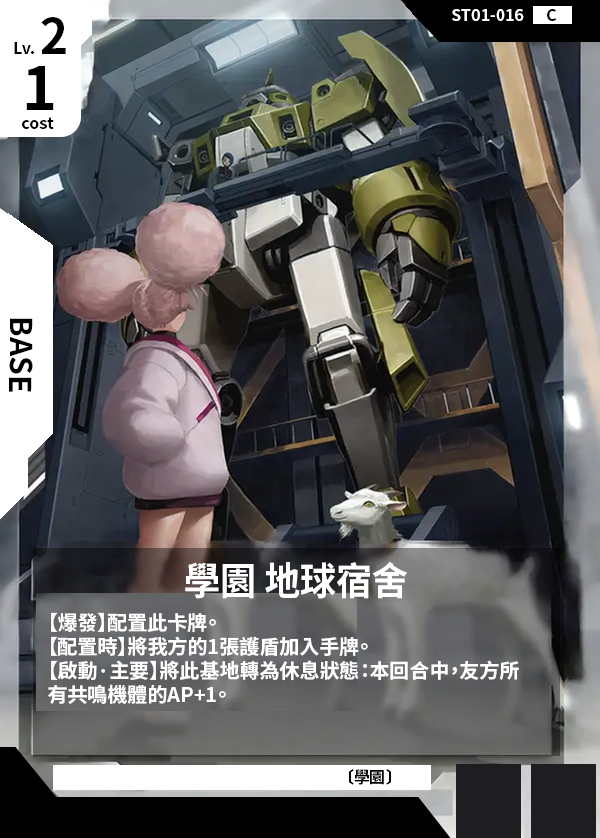
<style>
.page{position:relative;width:600px;height:838px}
.page>*{position:absolute;margin:0}
.t1{font:48px "NotoSansCJKtc-Bold";color:#000000}
.t2{font:16px "NotoSansCJKtc-Bold";color:#ffffff}
.t3{font:16px "NotoSansCJKtc-Bold";color:#000000}
.t4{font:60px "NotoSansCJKtc-Bold";color:#000000}
.t5{font:30px "NotoSansCJKtc-Bold";color:#000000}
.t6{font:38.4px "NotoSansCJKtc-Bold";color:#ffffff;scale:0.94 1}
.t7{font:20px "NotoSansCJKtc-Bold";color:#ffffff}
</style>
<div class="page">
<p class="t1" style="left:41px;top:17px;width:25px;height:37px">2</p>
<p class="t2" style="left:452px;top:9px;width:72px;height:12px">ST01-016</p>
<p class="t3" style="left:547px;top:9px;width:10px;height:12px">C</p>
<p class="t3" style="left:14px;top:42px;width:20px;height:12px">Lv.</p>
<p class="t4" style="left:26px;top:66px;width:28px;height:44px">1</p>
<p class="t3" style="left:22px;top:117px;width:32px;height:12px">cost</p>
<p class="t5" style="left:9px;top:318px;width:24px;height:74px;rotate:90deg">BASE</p>
<p class="t6" style="left:185px;top:562px;width:223px;height:37px">學園 地球宿舍</p>
<p class="t7" style="left:48px;top:612px;width:471px;height:92px">【爆發】配置此卡牌。<br>【配置時】將我方的1張護盾加入手牌。<br>【啟動·主要】將此基地轉為休息狀態：本回合中，友方所<br>有共鳴機體的AP+1。</p>
<p class="t3" style="left:349px;top:769px;width:42px;height:16px">〔學園〕</p>
</div>
